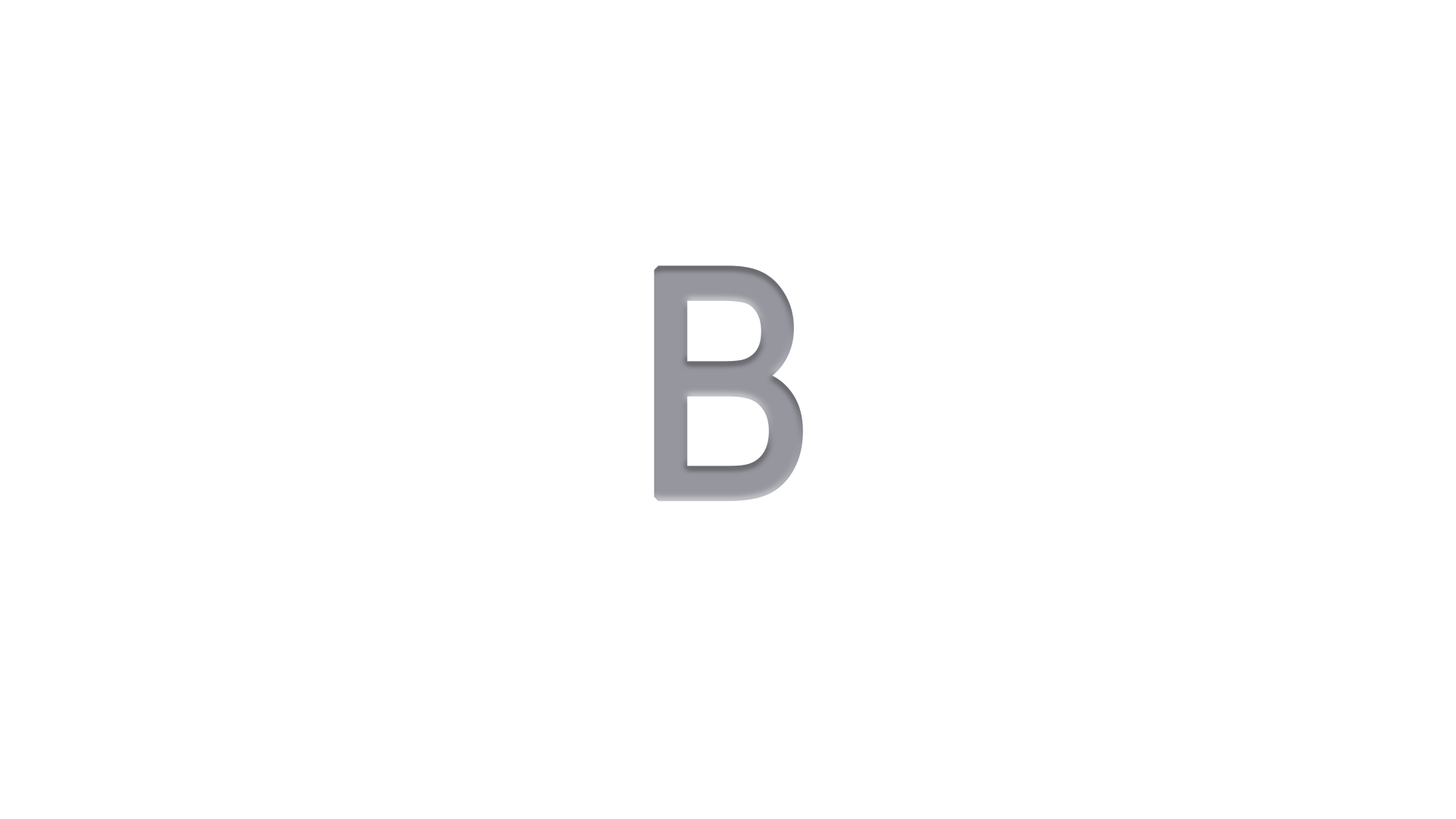
<style>
.page{position:relative;width:1456px;height:819px;background:#ffffff}
.page>*{position:absolute;margin:0}
.t1{font:316px "ArialNarrow";letter-spacing:0.025em;color:#95969e;font-weight:bold}
</style>
<div class="page">
<p class="t1" style="left:654px;top:265px;width:149px;height:236px">B</p>
</div>
